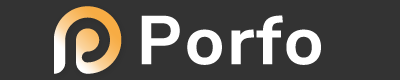
<style>
.page{position:relative;width:400px;height:80px;background:#333333}
.page>*{position:absolute;margin:0}
.t1{font:68px "NunitoSans-Bold";letter-spacing:0.02em;color:#ffffff;font-weight:bold}
</style>
<div class="page">
<p class="t1" style="left:141px;top:15px;width:180px;height:50px">Porfo</p>
</div>
